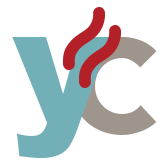
<style>
.page{position:relative;width:168px;height:168px;background:#ffffff}
.page>*{position:absolute;margin:0}
.t1{font:165px "Arial-Black";letter-spacing:0.05em;color:#73afb6;scale:0.97 1}
.t2{font:195.2px "Avenir-Heavy";letter-spacing:0.05em;color:#9e968d}
</style>
<div class="page">
<p class="t1" style="left:12px;top:37px;width:99px;height:121px">y</p>
<p class="t2" style="left:71px;top:37px;width:86px;height:98px">c</p>
</div>
